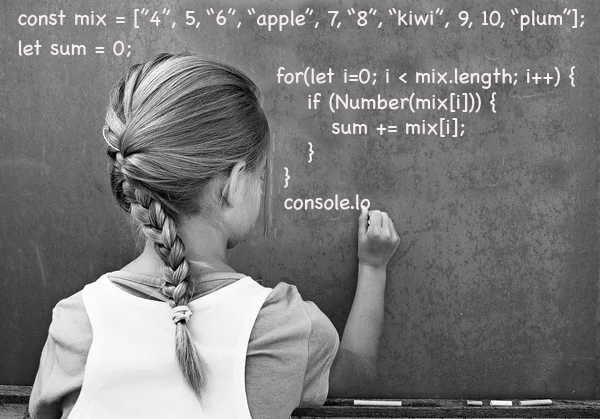
<style>
.page{position:relative;width:600px;height:419px}
.page>*{position:absolute;margin:0}
.t1{font:21px/30px "Chalkboard";color:#f7eeee}
.t2{font:21px "Chalkboard";color:#f7eeee}
</style>
<div class="page">
<p class="t1" style="left:18px;top:8px;width:566px;height:49px">const mix = [”4”, 5, “6”, “apple”, 7, “8”, “kiwi”, 9, 10, “plum”];<br>let sum = 0;</p>
<p class="t2" style="left:276px;top:66px;width:299px;height:144px">for(let i=0; i &lt; mix.length; i++) {<br>    if (Number(mix[i])) {<br>       sum += mix[i];<br>    }<br> }<br> console.lo</p>
</div>
